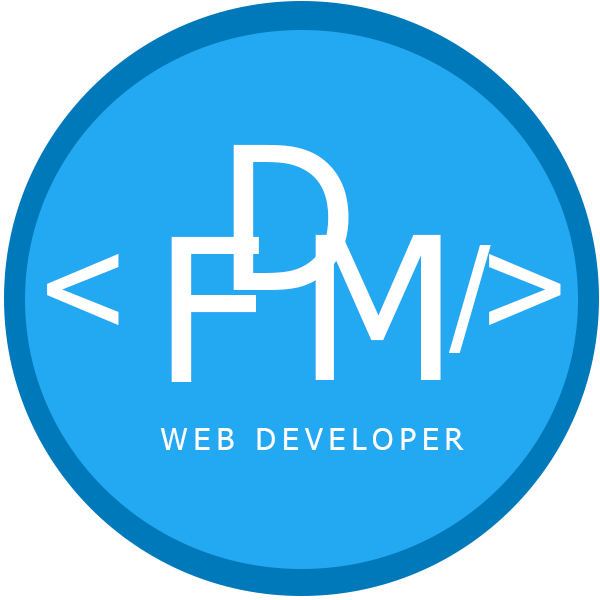
<style>
.page{position:relative;width:600px;height:600px;background:#23a8f2}
.page>*{position:absolute;margin:0}
.t1{font:200px "Tahoma";letter-spacing:0.2em;color:#ffffff;text-transform:uppercase}
.t2{font:150px "ArialMT";letter-spacing:0.2em;color:#ffffff;text-transform:uppercase}
.t3{font:30px "Tahoma";letter-spacing:0.2em;color:#ffffff;text-transform:uppercase}
</style>
<div class="page">
<p class="t1" style="left:233px;top:144px;width:116px;height:146px">D</p>
<p class="t1" style="left:171px;top:236px;width:88px;height:146px">F</p>
<p class="t1" style="left:315px;top:234px;width:126px;height:146px">M</p>
<p class="t2" style="left:449px;top:245px;width:42px;height:108px">/</p>
<p class="t2" style="left:47px;top:254px;width:72px;height:71px">&lt;</p>
<p class="t2" style="left:489px;top:254px;width:72px;height:71px">&gt;</p>
<p class="t3" style="left:160px;top:428px;width:304px;height:22px">web developer</p>
</div>
